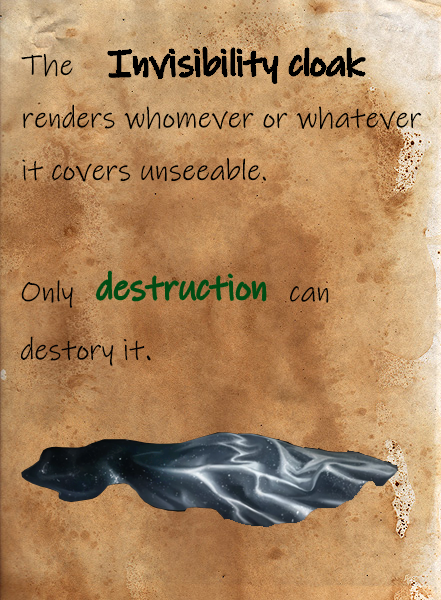
<style>
.page{position:relative;width:441px;height:600px}
.page>*{position:absolute;margin:0}
.t1{font:30px "InkFree";color:#000000}
.t2{font:30px "InkFree";color:#020202}
.t3{font:36px "InkFree";color:#020202}
</style>
<div class="page">
<p class="t1" style="left:21px;top:54px;width:401px;height:128px">The                             <br>renders whomever or whatever <br>it covers unseeable.</p>
<p class="t2" style="left:21px;top:280px;width:308px;height:86px">Only                         can<br>destory it<span class="t3">.</span></p>
</div>
